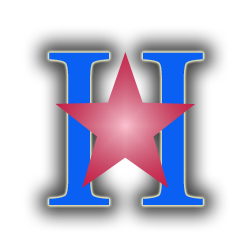
<style>
.page{position:relative;width:250px;height:250px;background:#ffffff}
.page>*{position:absolute;margin:0}
.t1{font:210px "LucidaBright";color:#0a60f3}
</style>
<div class="page">
<p class="t1" style="left:49px;top:52px;width:154px;height:153px">H</p>
</div>
